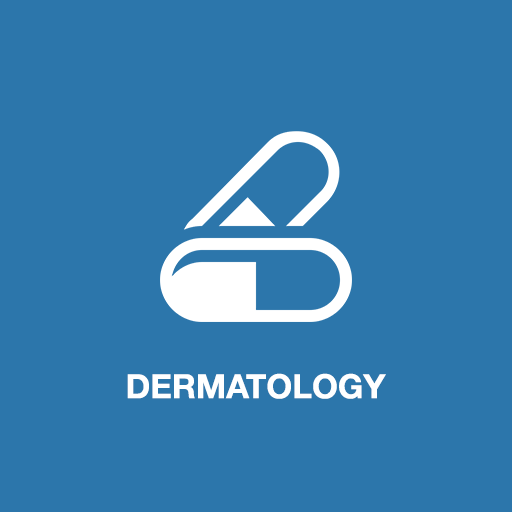
<style>
.page{position:relative;width:512px;height:512px;background:#2c76ab}
.page>*{position:absolute;margin:0}
.t1{font:33.3px "HelveticaNeue-Bold";color:#ffffff}
</style>
<div class="page">
<p class="t1" style="left:127px;top:373px;width:259px;height:26px">DERMATOLOGY</p>
</div>
